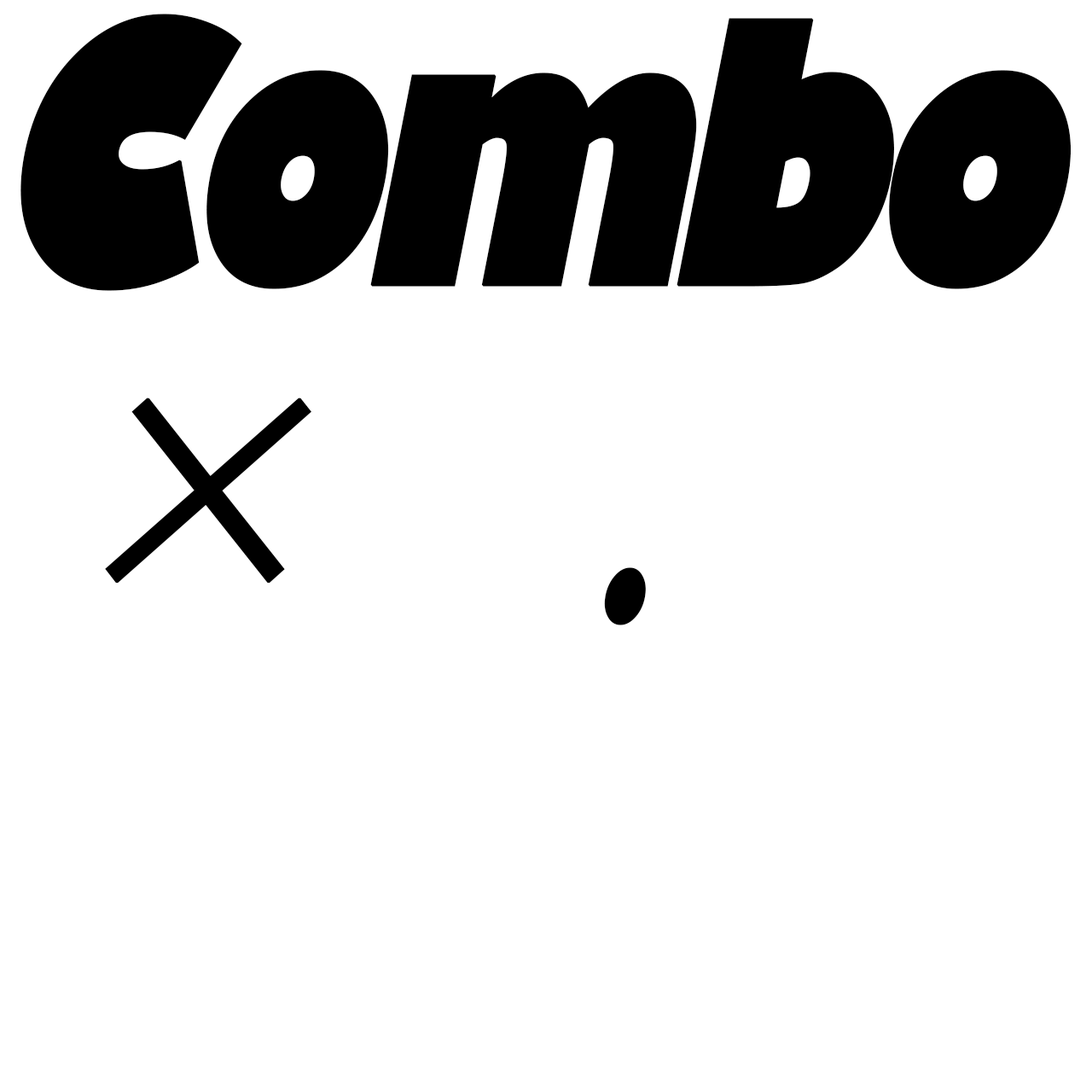
<style>
.page{position:relative;width:1092px;height:1092px;background:#ffffff}
.page>*{position:absolute;margin:0}
.t1{font:356.8px "GillSans-UltraBoldCondensed";letter-spacing:-0.07em;color:#000000;font-weight:bold;font-style:italic;scale:1.11 1}
.t2{font:284.7px "KozGoPr6N-Regular";letter-spacing:-0.07em;color:#000000;font-weight:bold;font-style:italic;scale:0.96 1}
.t3{font:171.7px "GillSans-UltraBoldCondensed";letter-spacing:-0.07em;color:#000000;font-weight:bold;font-style:italic}
</style>
<div class="page">
<p class="t1" style="left:20px;top:14px;width:1052px;height:277px">Combo</p>
<p class="t2" style="left:105px;top:398px;width:206px;height:186px">×</p>
<p class="t3" style="left:604px;top:567px;width:42px;height:58px">.</p>
</div>
